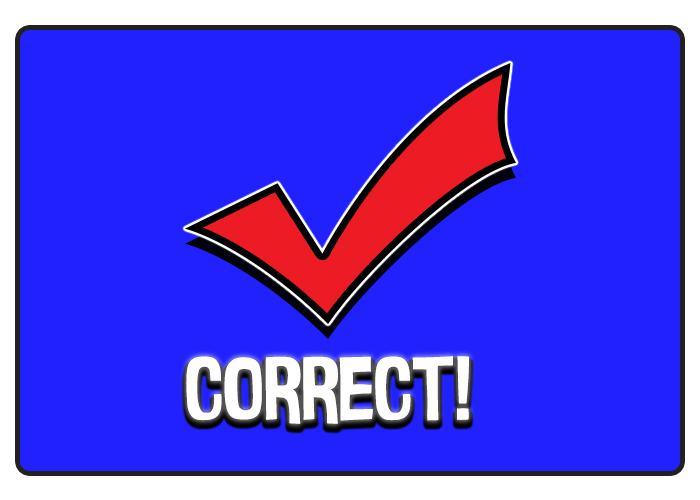
<style>
.page{position:relative;width:700px;height:500px;background:#2121ff}
.page>*{position:absolute;margin:0}
.t1{font:91.7px "InsideOut";color:#ffffff;scale:0.95 1}
</style>
<div class="page">
<p class="t1" style="left:186px;top:356px;width:283px;height:68px">correct!</p>
</div>
